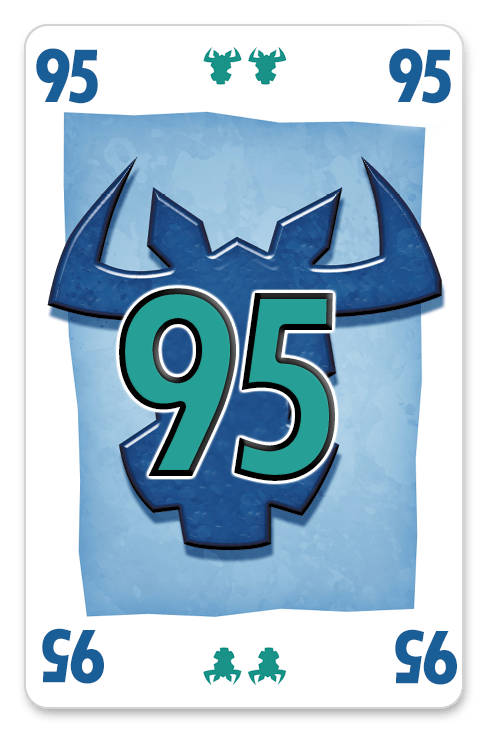
<style>
.page{position:relative;width:488px;height:732px;background:#ffffff}
.page>*{position:absolute;margin:0}
.t1{font:80px "TwCenMT-CondensedExtraBold";letter-spacing:-0.1em;color:#195e96}
.t2{font:280px "TwCenMT-CondensedExtraBold";letter-spacing:-0.1em;color:#26a096}
</style>
<div class="page">
<p class="t1" style="left:36px;top:48px;width:62px;height:56px">95</p>
<p class="t1" style="left:389px;top:48px;width:62px;height:56px">95</p>
<p class="t2" style="left:119px;top:288px;width:216px;height:193px">95</p>
<p class="t1" style="left:42px;top:628px;width:62px;height:56px;rotate:180deg">95</p>
<p class="t1" style="left:395px;top:629px;width:62px;height:56px;rotate:180deg">95</p>
</div>
